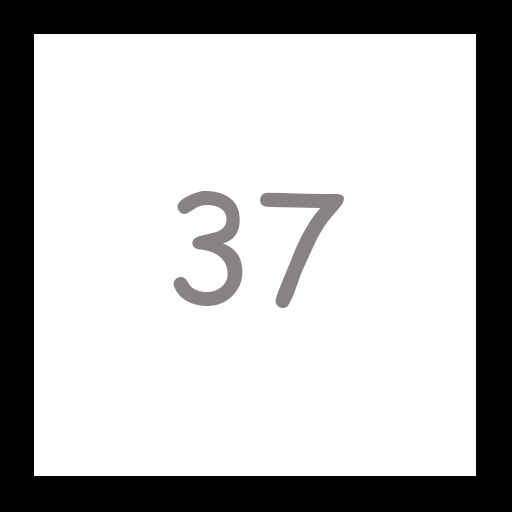
<style>
.page{position:relative;width:512px;height:512px;background:#ffffff}
.page>*{position:absolute;margin:0}
.t1{font:150px "ComicSansMS";color:#898282}
</style>
<div class="page">
<p class="t1" style="left:173px;top:191px;width:171px;height:117px">37</p>
</div>
